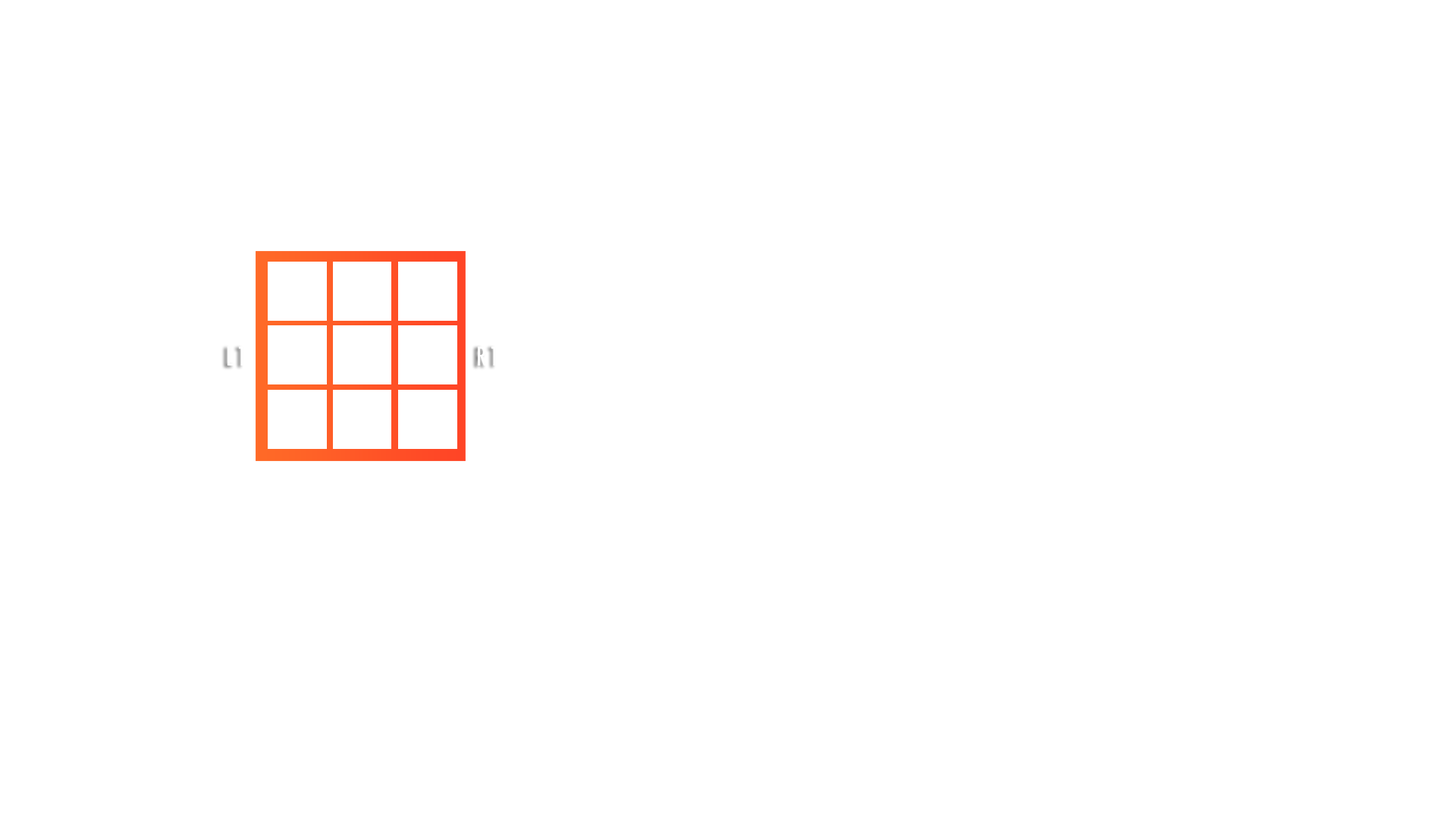
<style>
.page{position:relative;width:1456px;height:819px;background:#ffffff}
.page>*{position:absolute;margin:0}
.t1{font:25.3px "Futura-CondensedMedium";letter-spacing:0.1em;color:#ffffff}
</style>
<div class="page">
<p class="t1" style="left:227px;top:347px;width:16px;height:19px">L1</p>
<p class="t1" style="left:478px;top:347px;width:18px;height:19px">R1</p>
</div>
